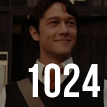
<style>
.page{position:relative;width:107px;height:107px}
.page>*{position:absolute;margin:0}
.t1{font:47px "BebasNeueBold";letter-spacing:0.015em;color:#ffffff}
</style>
<div class="page">
<p class="t1" style="left:28px;top:63px;width:72px;height:35px">1024</p>
</div>
